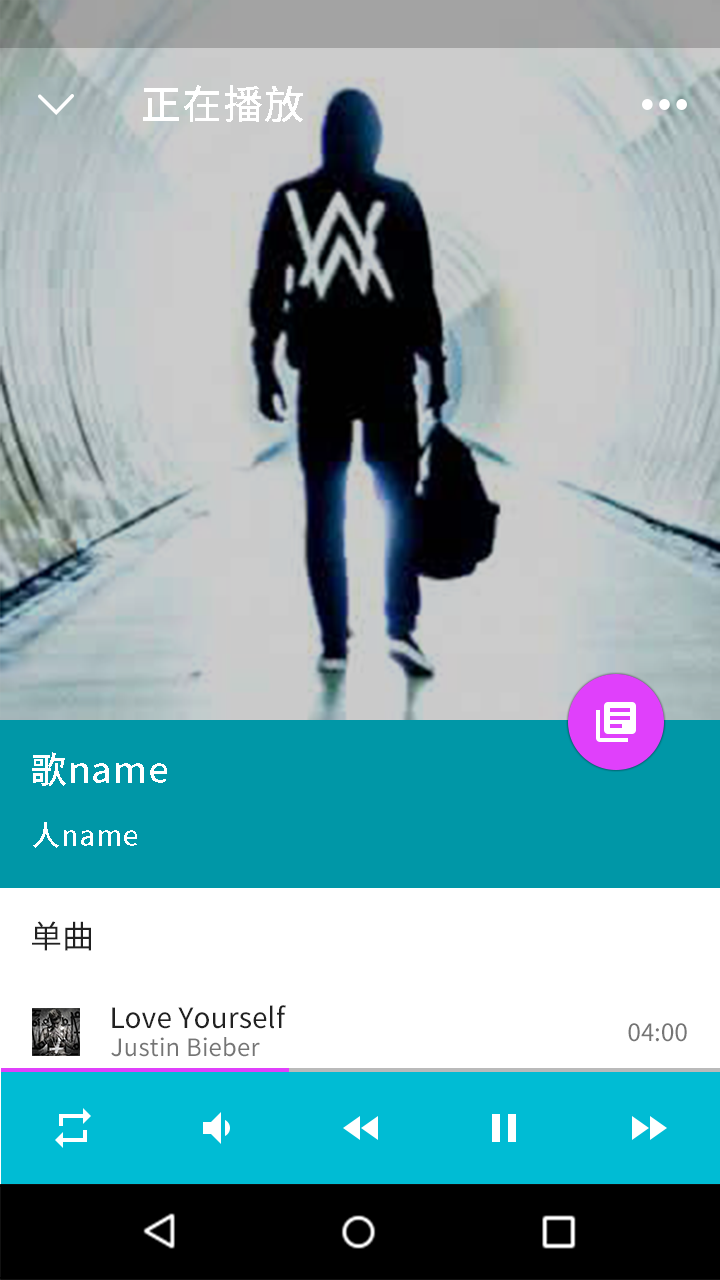
<style>
.page{position:relative;width:720px;height:1280px}
.page>*{position:absolute;margin:0}
.t1{font:40px "SourceHanSansCN-Medium";letter-spacing:0.03em;color:#ffffff}
.t2{font:36px "SourceHanSansCN-Medium";letter-spacing:0.03em;color:#ffffff}
.t3{font:28px "SourceHanSansCN-Medium";letter-spacing:0.03em;color:#ffffff}
.t4{font:32px "SourceHanSansCN-Regular";letter-spacing:0.005em;color:#212121}
.t5{font:28px "SourceHanSansCN-Regular";letter-spacing:0.005em;color:#212121}
.t6{font:24px "SourceHanSansCN-Regular";letter-spacing:0.005em;color:#757575}
</style>
<div class="page">
<p class="t1" style="left:143px;top:85px;width:160px;height:37px">正在播放</p>
<p class="t2" style="left:32px;top:752px;width:135px;height:34px">歌name</p>
<p class="t3" style="left:33px;top:822px;width:104px;height:26px">人name</p>
<p class="t4" style="left:32px;top:921px;width:59px;height:30px">单曲</p>
<p class="t5" style="left:112px;top:1005px;width:174px;height:24px">Love Yourself</p>
<p class="t6" style="left:628px;top:1023px;width:59px;height:19px">04:00</p>
<p class="t6" style="left:111px;top:1037px;width:149px;height:20px">Justin Bieber</p>
</div>
